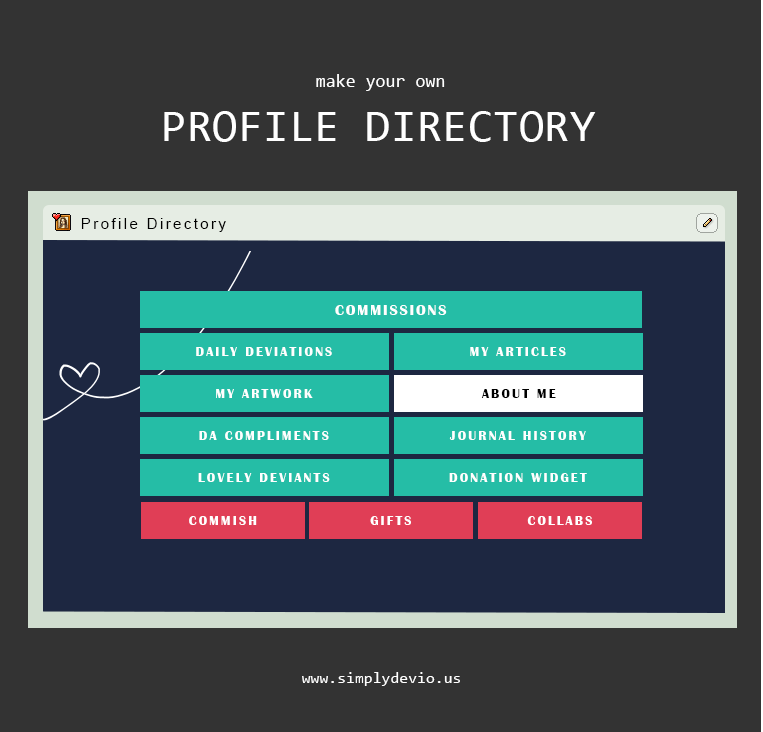
<style>
.page{position:relative;width:763px;height:732px;background:#333333}
.page>*{position:absolute;margin:0}
.t1{font:18px "Consolas";letter-spacing:0.005em;color:#ffffff}
.t2{font:46px "Consolas";letter-spacing:0.005em;color:#ffffff;text-transform:uppercase}
.t3{font:15px "ArialMT";letter-spacing:0.16em;color:#000000}
.t4{font:15px "ArialMT";letter-spacing:0.16em;color:#000000;text-transform:uppercase}
.t5{font:15px "BritannicBold";letter-spacing:0.12em;color:#ffffff;text-transform:uppercase}
.t6{font:13px "BritannicBold";letter-spacing:0.16em;color:#ffffff;text-transform:uppercase}
.t7{font:13px "BritannicBold";letter-spacing:0.16em;color:#000000;text-transform:uppercase}
.t8{font:16px "Consolas";letter-spacing:0.005em;color:#ffffff}
</style>
<div class="page">
<p class="t1" style="left:316px;top:74px;width:129px;height:17px">make your own</p>
<p class="t2" style="left:164px;top:111px;width:432px;height:31px">profile directory</p>
<p class="t3" style="left:81px;top:218px;width:145px;height:14px">Profile <span class="t4">d</span>irectory</p>
<p class="t5" style="left:335px;top:305px;width:112px;height:10px">commissions</p>
<p class="t6" style="left:196px;top:347px;width:136px;height:9px">daily deviations</p>
<p class="t6" style="left:470px;top:347px;width:96px;height:9px">my articles</p>
<p class="t6" style="left:216px;top:389px;width:97px;height:9px">my artwork</p>
<p class="t7" style="left:481px;top:389px;width:75px;height:9px">about me</p>
<p class="t6" style="left:199px;top:431px;width:130px;height:9px">da compliments</p>
<p class="t6" style="left:449px;top:431px;width:137px;height:9px">journal history</p>
<p class="t6" style="left:198px;top:473px;width:132px;height:9px">lovely deviants</p>
<p class="t6" style="left:449px;top:473px;width:138px;height:9px">donation widget</p>
<p class="t6" style="left:189px;top:516px;width:68px;height:9px">commish</p>
<p class="t6" style="left:370px;top:516px;width:41px;height:9px">gifts</p>
<p class="t6" style="left:527px;top:516px;width:65px;height:9px">collabs</p>
<p class="t8" style="left:302px;top:672px;width:158px;height:14px">www.simplydevio.us</p>
</div>
